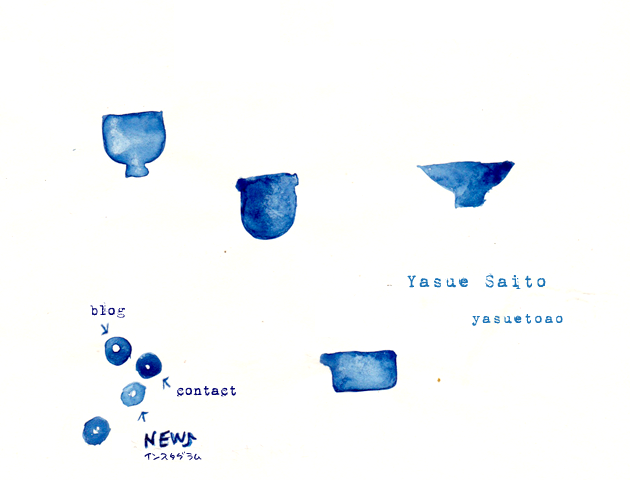
<style>
.page{position:relative;width:630px;height:480px;background:#ffffff}
.page>*{position:absolute;margin:0}
.t1{font:20px "1942report";color:#1973b6}
.t2{font:16px "1942report";letter-spacing:-0.1em;color:#000070}
.t3{font:16px "1942report";color:#1973b6}
.t4{font:10px "Holiday-MDJP01";color:#000062}
</style>
<div class="page">
<p class="t1" style="left:407px;top:273px;width:139px;height:16px">Yasue Saito</p>
<p class="t2" style="left:90px;top:302px;width:35px;height:16px">blog</p>
<p class="t3" style="left:472px;top:314px;width:91px;height:12px">yasuetoao</p>
<p class="t2" style="left:177px;top:386px;width:59px;height:11px">contact</p>
<p class="t4" style="left:144px;top:451px;width:58px;height:10px">インスタグラム</p>
</div>
